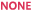
<style>
.page{position:relative;width:31px;height:11px;background:#ffffff}
.page>*{position:absolute;margin:0}
.t1{font:10px "MicrosoftYaHei";color:#db3156;font-weight:bold}
</style>
<div class="page">
<p class="t1" style="left:1px;top:1px;width:30px;height:9px">NONE</p>
</div>
